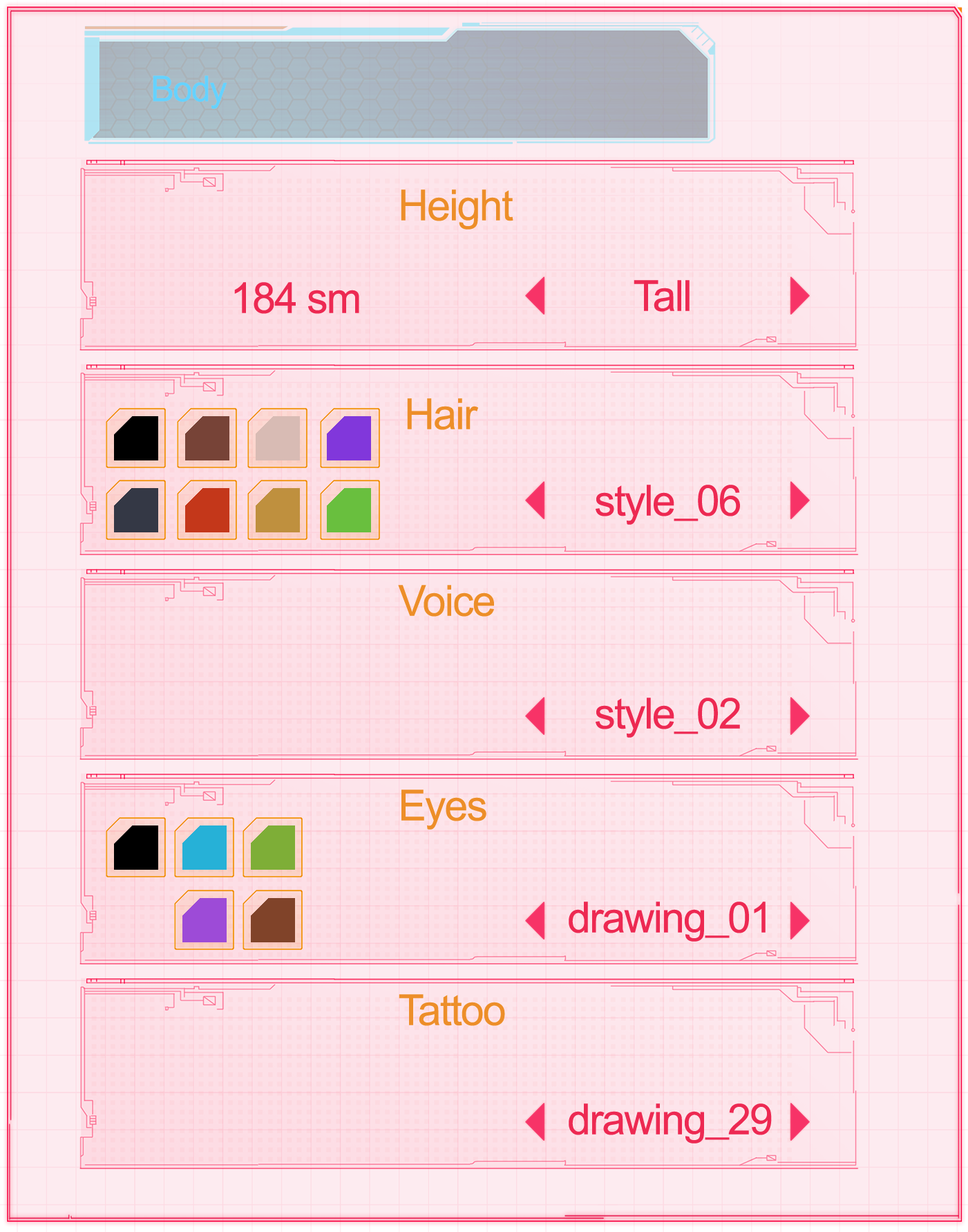
<style>
.page{position:relative;width:968px;height:1232px}
.page>*{position:absolute;margin:0}
.t1{font:35.4px "ArialNarrow";letter-spacing:-0.025em;color:#65d2ff;scale:1.2 1}
.t2{font:42.7px "ArialNarrow";letter-spacing:-0.025em;color:#ed8e29;scale:1.2 1}
.t3{font:42.7px "ArialNarrow";letter-spacing:-0.025em;color:#ed2952;scale:1.2 1}
</style>
<div class="page">
<p class="t1" style="left:153px;top:75px;width:74px;height:34px">Body</p>
<p class="t2" style="left:401px;top:189px;width:112px;height:40px">Height</p>
<p class="t3" style="left:234px;top:282px;width:125px;height:32px">184 sm</p>
<p class="t3" style="left:634px;top:280px;width:56px;height:32px">Tall</p>
<p class="t2" style="left:407px;top:398px;width:71px;height:32px">Hair</p>
<p class="t3" style="left:596px;top:484px;width:144px;height:41px">style_06</p>
<p class="t2" style="left:398px;top:585px;width:96px;height:31px">Voice</p>
<p class="t3" style="left:596px;top:697px;width:144px;height:40px">style_02</p>
<p class="t2" style="left:402px;top:789px;width:85px;height:40px">Eyes</p>
<p class="t3" style="left:569px;top:901px;width:197px;height:40px">drawing_01</p>
<p class="t2" style="left:399px;top:994px;width:106px;height:32px">Tattoo</p>
<p class="t3" style="left:569px;top:1103px;width:203px;height:40px">drawing_29</p>
</div>
